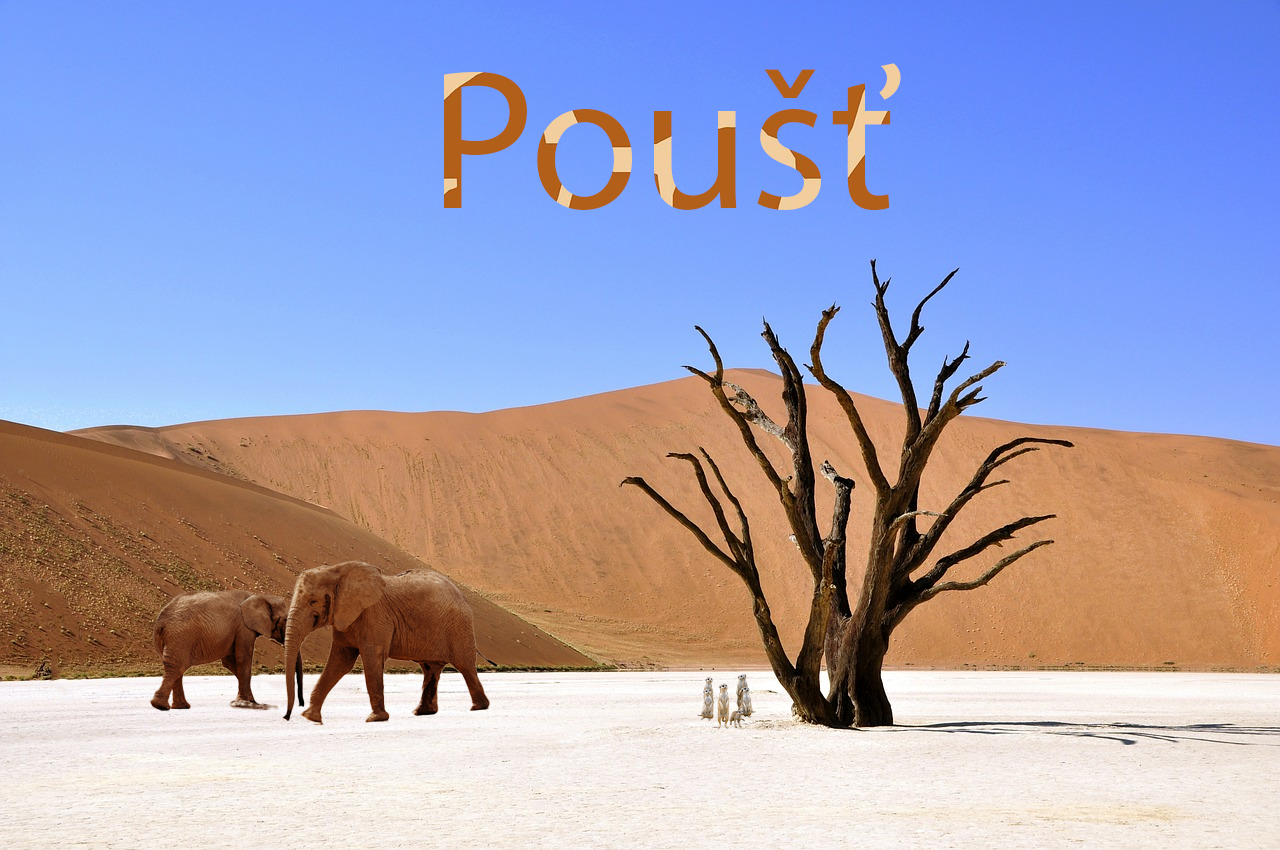
<style>
.page{position:relative;width:1280px;height:850px}
.page>*{position:absolute;margin:0}
.t1{font:199.8px "MyriadPro-Regular"}
</style>
<div class="page">
<p class="t1" style="left:444px;top:63px;width:457px;height:148px">Poušť</p>
</div>
